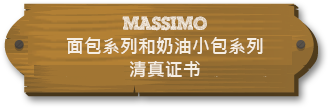
<style>
.page{position:relative;width:328px;height:108px}
.page>*{position:absolute;margin:0}
.t1{font:18px/23px "MicrosoftJhengHeiBold";color:#f5eee4}
.t2{font:18px/23px "ScribbleBoxDEMO";color:#f5eee4}
</style>
<div class="page">
<p class="t1" style="left:66px;top:16px;width:197px;height:62px;text-align:center"><span class="t2">Massimo<br></span>面包系列和奶油小包系列<br>清真证书</p>
</div>
